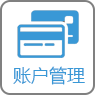
<style>
.page{position:relative;width:95px;height:95px;background:#ffffff}
.page>*{position:absolute;margin:0}
.t1{font:18px "MicrosoftYaHei";color:#3998d6}
</style>
<div class="page">
<p class="t1" style="left:13px;top:66px;width:72px;height:19px">账户管理</p>
</div>
